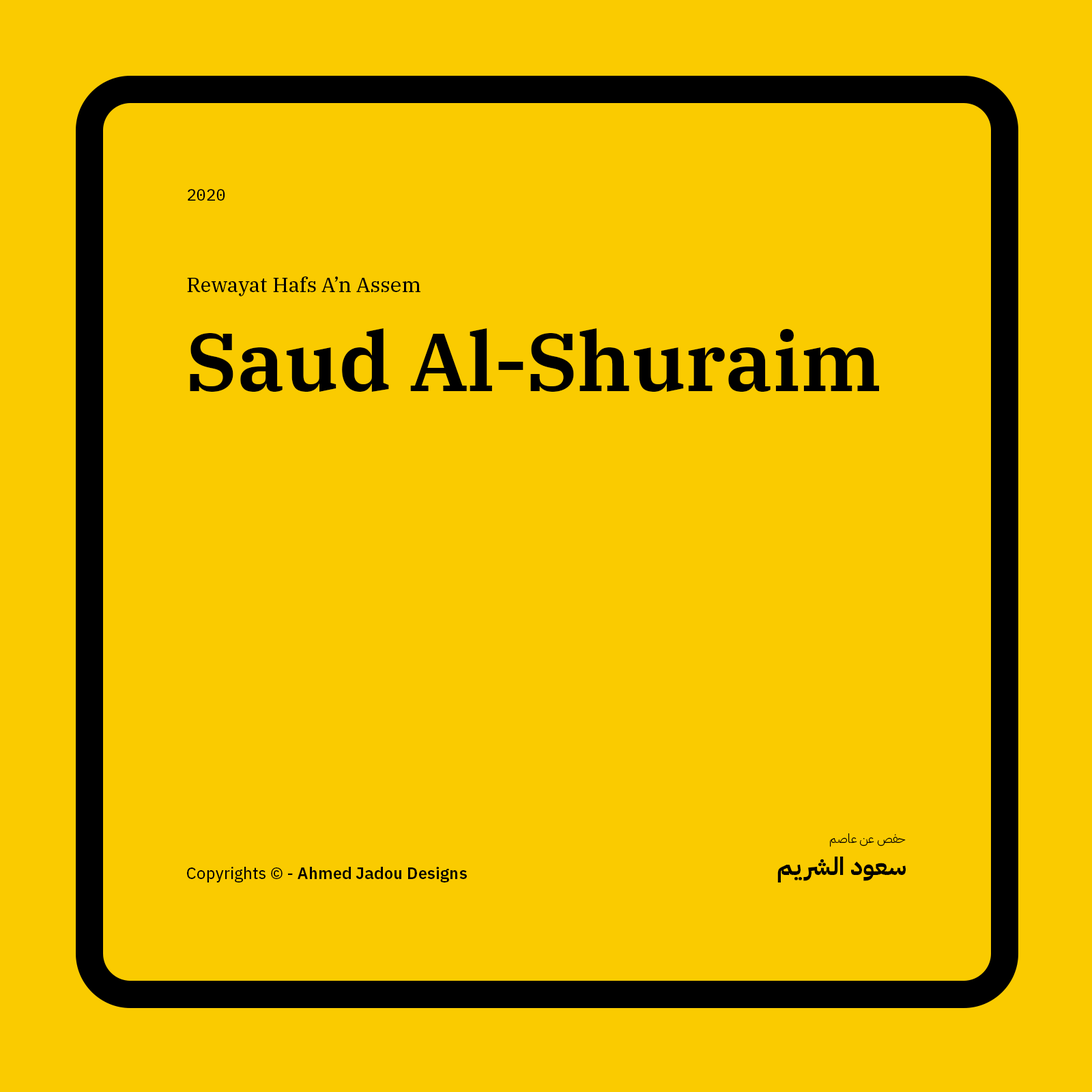
<style>
.page{position:relative;width:1092px;height:1092px;background:#facb00}
.page>*{position:absolute;margin:0}
.t1{font:16.4px "IBMPlexMono-Text";color:#000000}
.t2{font:20.5px "IBMPlexSerif-Text";color:#000000}
.t3{font:81.9px "IBMPlexSerif-SemiBold";color:#000000}
.t4{font:12.3px "IBMPlexArabic-Light";color:#000000}
.t5{font:24.6px "IBMPlexArabic-Bold";color:#000000}
.t6{font:16.4px "IBMPlexSans-SemiBold";color:#000000}
.t7{font:16.4px "IBMPlexSans-Text";color:#000000}
</style>
<div class="page">
<p class="t1" style="left:188px;top:189px;width:37px;height:12px">2020</p>
<p class="t2" style="left:187px;top:276px;width:233px;height:20px">Rewayat Hafs A’n Assem</p>
<p class="t3" style="left:190px;top:328px;width:689px;height:64px">Saud Al-Shuraim</p>
<p class="t4" style="left:830px;top:833px;width:76px;height:14px">حفص عن عاصم</p>
<p class="t5" style="left:777px;top:857px;width:129px;height:25px">سعود الشريم</p>
<p class="t6" style="left:187px;top:867px;width:280px;height:15px"><span class="t7">Copyrights © - </span>Ahmed Jadou Designs</p>
</div>
